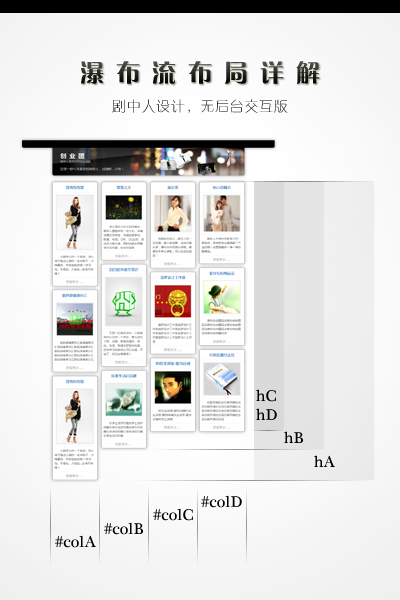
<style>
.page{position:relative;width:400px;height:600px}
.page>*{position:absolute;margin:0}
.t1{font:24px "FZCQJW--GB1-0";letter-spacing:0.5em}
.t2{font:14px "FZXQJW--GB1-0";letter-spacing:0.05em}
.t3{font:16px "PlantagenetCherokee";color:#000000}
</style>
<div class="page">
<p class="t1" style="left:81px;top:61px;width:239px;height:23px">瀑布流布局详解</p>
<p class="t2" style="left:112px;top:99px;width:176px;height:14px">剧中人设计，无后台交互版</p>
<p class="t3" style="left:256px;top:389px;width:20px;height:13px">hC</p>
<p class="t3" style="left:256px;top:408px;width:21px;height:12px">hD</p>
<p class="t3" style="left:284px;top:431px;width:19px;height:12px">hB</p>
<p class="t3" style="left:314px;top:455px;width:21px;height:12px">hA</p>
<p class="t3" style="left:201px;top:495px;width:41px;height:13px">#colD</p>
<p class="t3" style="left:153px;top:508px;width:40px;height:13px">#colC</p>
<p class="t3" style="left:104px;top:522px;width:39px;height:13px">#colB</p>
<p class="t3" style="left:55px;top:535px;width:41px;height:13px">#colA</p>
</div>
